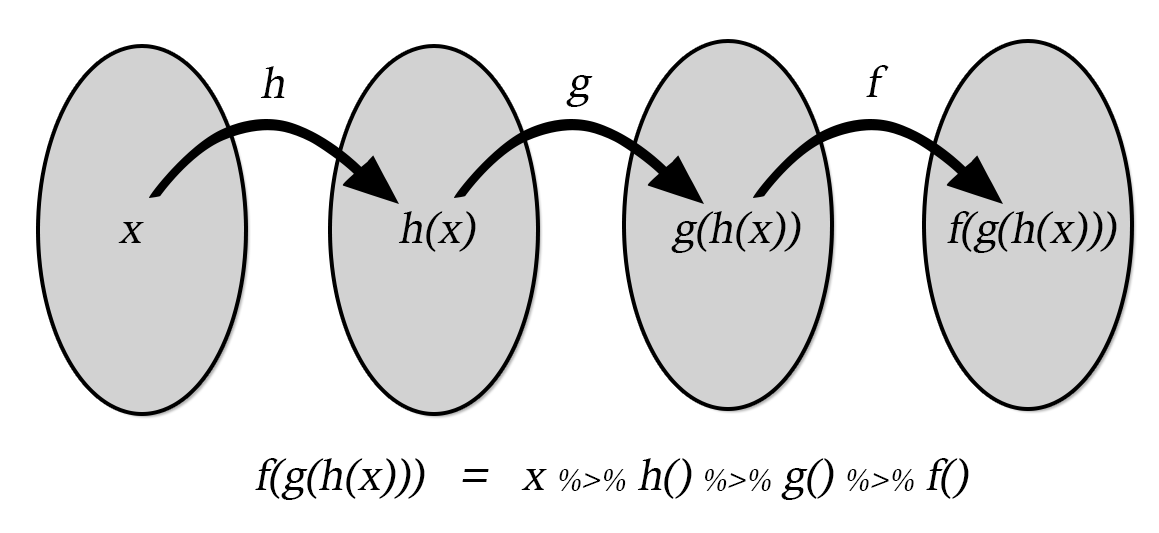
<style>
.page{position:relative;width:1159px;height:533px;background:#ffffff}
.page>*{position:absolute;margin:0}
.t1{font:44.6px "CalistoMT";color:#000000;font-style:italic}
.t2{font:30px "CalistoMT";color:#000000;font-style:italic}
</style>
<div class="page">
<p class="t1" style="left:866px;top:65px;width:23px;height:32px">f</p>
<p class="t1" style="left:260px;top:66px;width:25px;height:32px">h</p>
<p class="t1" style="left:566px;top:75px;width:27px;height:32px">g</p>
<p class="t1" style="left:118px;top:222px;width:26px;height:21px">x</p>
<p class="t1" style="left:398px;top:211px;width:78px;height:41px">h(x)</p>
<p class="t1" style="left:671px;top:211px;width:130px;height:42px">g(h(x))</p>
<p class="t1" style="left:947px;top:211px;width:170px;height:42px">f(g(h(x)))</p>
<p class="t1" style="left:255px;top:458px;width:714px;height:42px">f(g(h(x)))   =   x <span class="t2">%&gt;%</span> h() <span class="t2">%&gt;%</span> g() <span class="t2">%&gt;%</span> f()</p>
</div>
